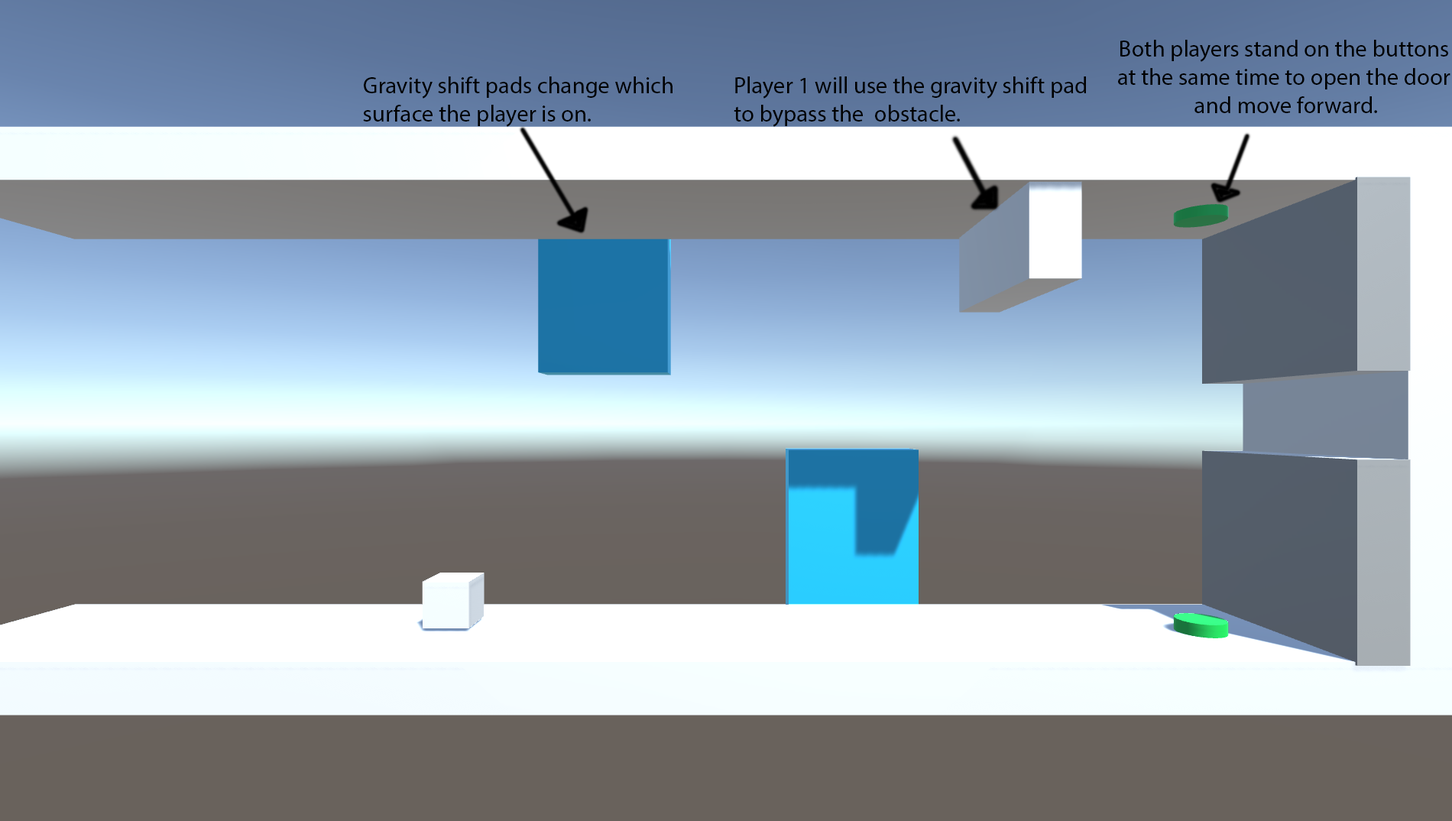
<style>
.page{position:relative;width:1452px;height:821px}
.page>*{position:absolute;margin:0}
.t1{font:23.4px "MyriadPro-Regular";color:#000000}
</style>
<div class="page">
<p class="t1" style="left:1118px;top:40px;width:333px;height:73px;text-align:center">Both players stand on the buttons <br>at the same time to open the door <br>and move forward.</p>
<p class="t1" style="left:363px;top:76px;width:310px;height:51px">Gravity shift pads change which<br>surface the player is on.</p>
<p class="t1" style="left:734px;top:76px;width:352px;height:51px">Player 1 will use the gravity shift pad<br>to bypass the  obstacle.</p>
</div>
